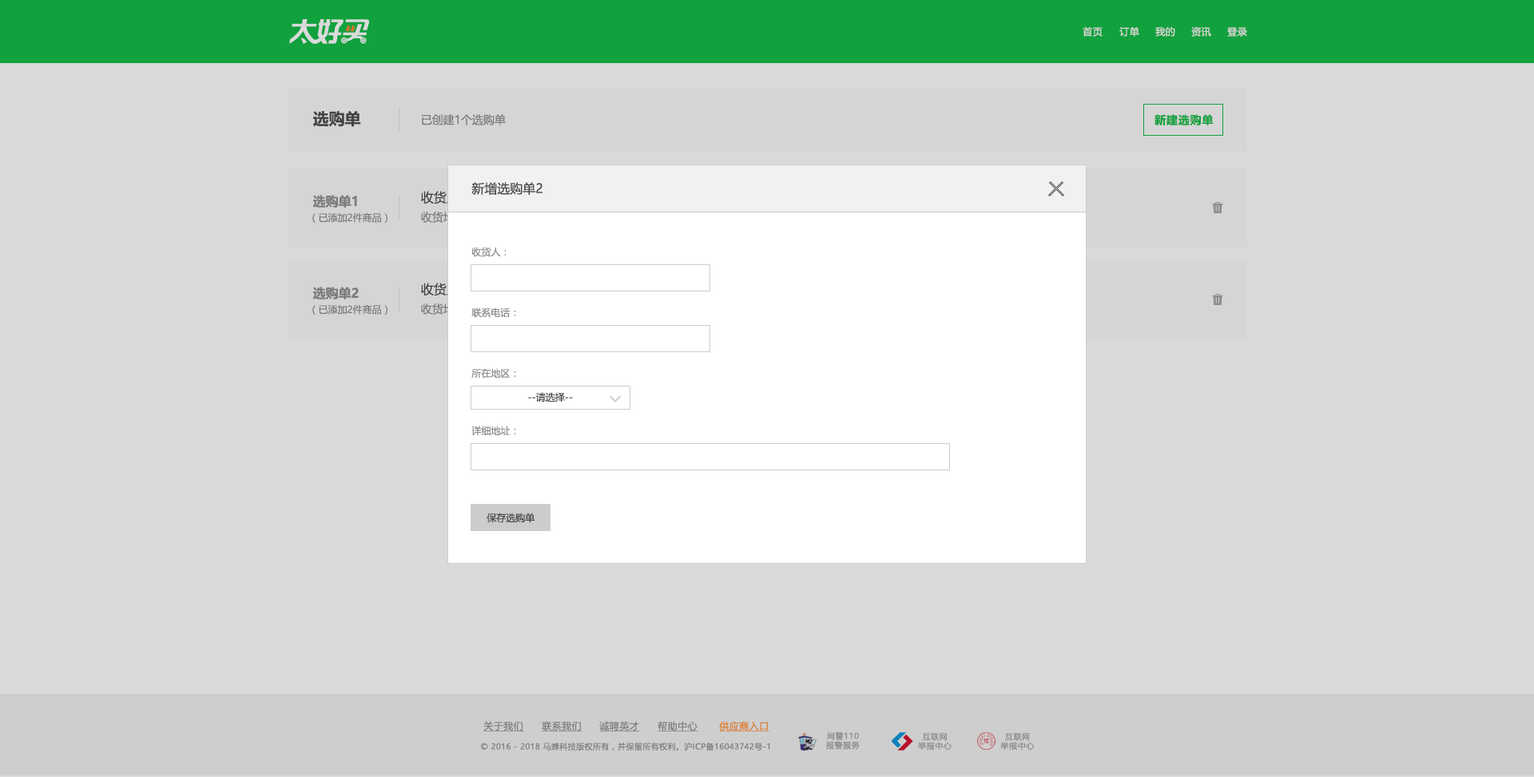
<style>
.page{position:relative;width:1534px;height:777px;background:#dadada}
.page>*{position:absolute;margin:0}
.t1{font:9.6px "MicrosoftYaHeiUI";letter-spacing:0.04em;color:#dadada}
.t2{font:16px "MicrosoftYaHeiUI-Bold";color:#444444}
.t3{font:11.2px "MicrosoftYaHeiUI";color:#888888}
.t4{font:11.2px "MicrosoftYaHeiUI-Bold";letter-spacing:0.06em;color:#04b83b}
.t5{font:12.8px "MicrosoftYaHeiUI";color:#444444}
.t6{font:12.8px "MicrosoftYaHeiUI-Bold";color:#888888}
.t7{font:9.6px "MicrosoftYaHeiUI";color:#888888}
.t8{font:9.6px "MicrosoftYaHeiUI";color:#8c8c8c}
.t9{font:9.6px "MicrosoftYaHeiUI";color:#444444}
.t10{font:9.6px "MicrosoftYaHeiUI";letter-spacing:0.04em;color:#8c8c8c;text-decoration:underline}
.t11{font:9.6px "MicrosoftYaHeiUI";letter-spacing:0.04em;color:#da7d2b;text-decoration:underline}
.t12{font:8px/9.3px "MicrosoftYaHei";letter-spacing:0.06em;color:#999999}
.t13{font:8px "MicrosoftYaHeiUI";letter-spacing:0.04em;color:#8c8c8c}
</style>
<div class="page">
<p class="t1" style="left:1083px;top:26px;width:20px;height:11px">首页</p>
<p class="t1" style="left:1119px;top:26px;width:20px;height:11px">订单</p>
<p class="t1" style="left:1155px;top:26px;width:20px;height:11px">我的</p>
<p class="t1" style="left:1191px;top:26px;width:20px;height:11px">资讯</p>
<p class="t1" style="left:1227px;top:27px;width:20px;height:10px">登录</p>
<p class="t2" style="left:313px;top:111px;width:48px;height:16px">选购单</p>
<p class="t3" style="left:421px;top:114px;width:85px;height:11px">已创建1个选购单</p>
<p class="t4" style="left:1154px;top:114px;width:60px;height:12px">新建选购单</p>
<p class="t5" style="left:471px;top:182px;width:71px;height:13px">新增选购单2</p>
<p class="t6" style="left:312px;top:195px;width:45px;height:13px">选购单1</p>
<p class="t7" style="left:312px;top:213px;width:75px;height:10px">（已添加2件商品）</p>
<p class="t8" style="left:471px;top:247px;width:36px;height:10px">收货人：</p>
<p class="t6" style="left:312px;top:287px;width:47px;height:13px">选购单2</p>
<p class="t7" style="left:312px;top:304px;width:75px;height:11px">（已添加2件商品）</p>
<p class="t8" style="left:471px;top:308px;width:45px;height:10px">联系电话：</p>
<p class="t8" style="left:471px;top:368px;width:45px;height:11px">所在地区：</p>
<p class="t9" style="left:528px;top:392px;width:45px;height:11px">--请选择--</p>
<p class="t8" style="left:471px;top:426px;width:45px;height:10px">详细地址：</p>
<p class="t9" style="left:487px;top:513px;width:48px;height:10px">保存选购单</p>
<p class="t10" style="left:483px;top:721px;width:41px;height:11px">关于我们</p>
<p class="t10" style="left:542px;top:721px;width:40px;height:11px">联系我们</p>
<p class="t10" style="left:599px;top:721px;width:41px;height:11px">诚聘英才</p>
<p class="t10" style="left:658px;top:721px;width:40px;height:11px">帮助中心</p>
<p class="t11" style="left:719px;top:721px;width:50px;height:11px">供应商入口</p>
<p class="t12" style="left:826px;top:732px;width:34px;height:18px;text-align:center">网警110<br>报警服务</p>
<p class="t12" style="left:918px;top:733px;width:34px;height:17px;text-align:center">互联网<br>举报中心</p>
<p class="t12" style="left:1000px;top:733px;width:35px;height:17px;text-align:center">互联网<br>举报中心</p>
<p class="t13" style="left:481px;top:742px;width:289px;height:9px">© 2016 - 2018 马蜂科技版权所有，并保留所有权利。沪ICP备16043742号-1</p>
</div>
